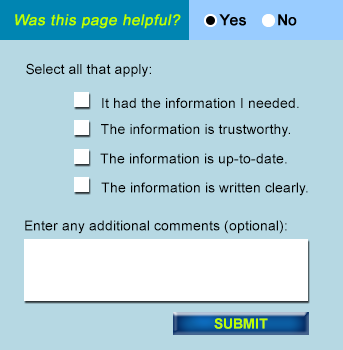
<style>
.page{position:relative;width:343px;height:350px;background:#b6d8e3}
.page>*{position:absolute;margin:0}
.t1{font:14px "ArialMT";color:#000000}
.t2{font:14px "Arial-BoldMT";color:#bfff00}
</style>
<div class="page">
<p class="t1" style="left:26px;top:63px;width:125px;height:14px">Select all that apply:</p>
<p class="t1" style="left:102px;top:98px;width:197px;height:10px">It had the information I needed.</p>
<p class="t1" style="left:101px;top:124px;width:189px;height:13px">The information is trustworthy.</p>
<p class="t1" style="left:100px;top:153px;width:187px;height:14px">The information is up-to-date.</p>
<p class="t1" style="left:101px;top:182px;width:207px;height:14px">The information is written clearly.</p>
<p class="t1" style="left:25px;top:220px;width:262px;height:14px">Enter any additional comments (optional):</p>
<p class="t2" style="left:214px;top:318px;width:54px;height:11px">SUBMIT</p>
</div>
